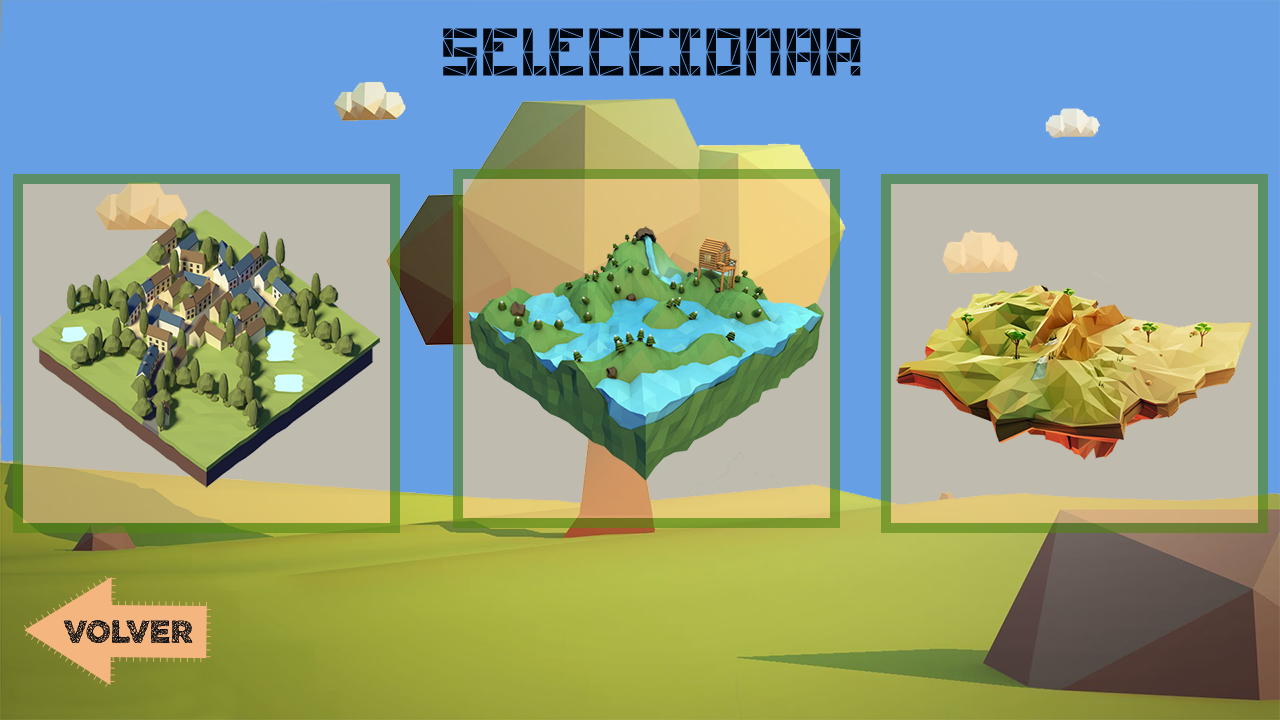
<style>
.page{position:relative;width:1280px;height:720px;background:#679fe4}
.page>*{position:absolute;margin:0}
.t1{font:66.7px "Polygon-Regular";color:#01070e}
.t2{font:32px "POLYARegular-Regular";color:#01070e}
</style>
<div class="page">
<p class="t1" style="left:443px;top:28px;width:418px;height:48px">SELECCIONAR</p>
<p class="t2" style="left:63px;top:620px;width:130px;height:23px">volver</p>
<p class="t2" style="left:63px;top:620px;width:130px;height:23px">volver</p>
</div>
